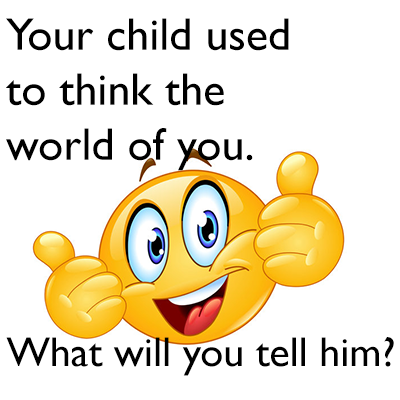
<style>
.page{position:relative;width:400px;height:400px;background:#ffffff}
.page>*{position:absolute;margin:0}
.t1{font:45.8px "GillSans";color:#000000}
.t2{font:41.7px "GillSans";color:#000000}
</style>
<div class="page">
<p class="t1" style="left:6px;top:18px;width:283px;height:153px">Your child used<br>to think the<br>world of you.</p>
<p class="t2" style="left:6px;top:337px;width:388px;height:39px">What will you tell him?</p>
</div>
